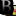
<style>
.page{position:relative;width:16px;height:16px;background:#000000}
.page>*{position:absolute;margin:0}
.t1{font:15.4px "Times-Roman"}
</style>
<div class="page">
<p class="t1" style="left:1px;top:0px;width:10px;height:12px">B</p>
</div>
